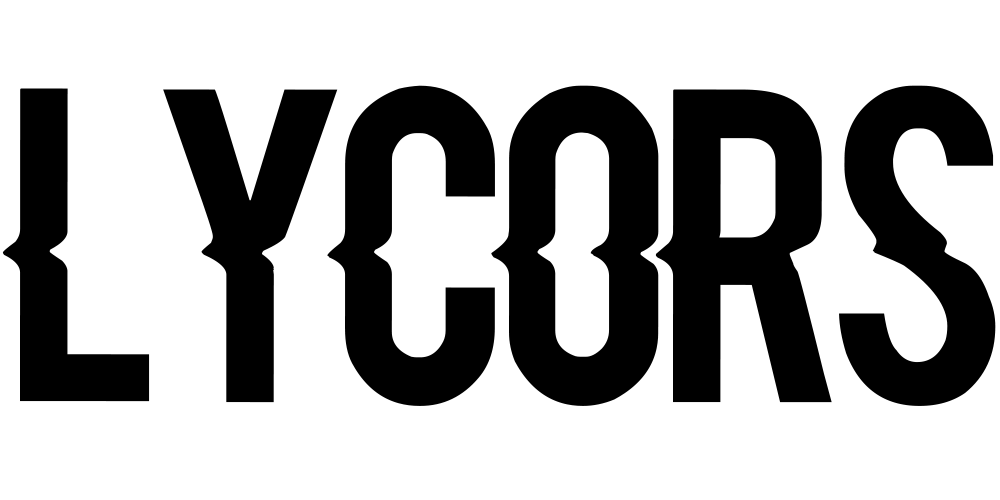
<style>
.page{position:relative;width:1000px;height:500px;background:#ffffff}
.page>*{position:absolute;margin:0}
.t1{font:303px "Blacklisted";color:#000000}
</style>
<div class="page">
<p class="t1" style="left:2px;top:85px;width:994px;height:321px">Lycors</p>
</div>
